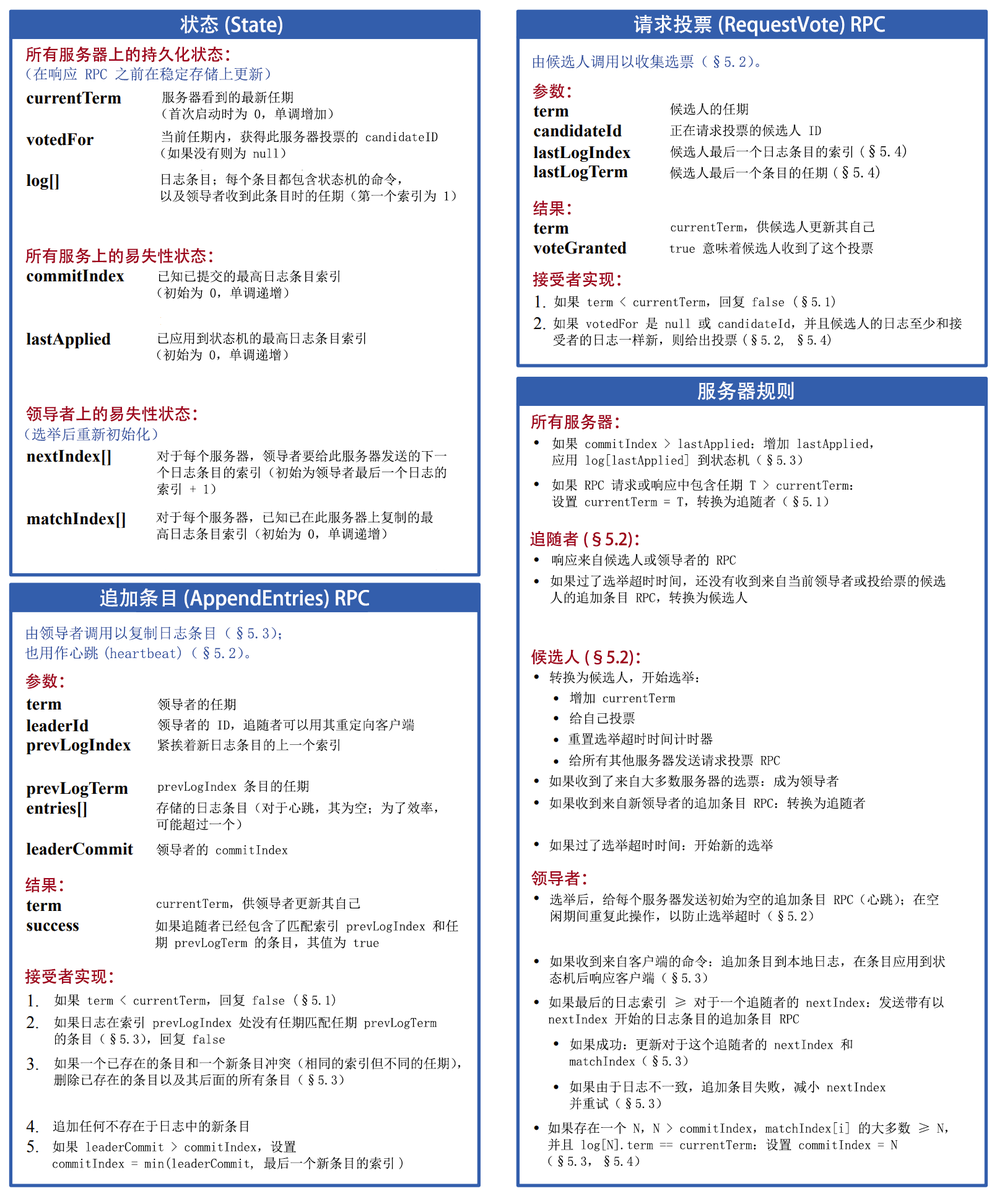
<style>
.page{position:relative;width:997px;height:1196px;background:#ffffff}
.page>*{position:absolute;margin:0}
.t1{font:19.8px "AdobeHeitiStd-Regular";color:#ffffff}
.t2{font:16.5px "AdobeHeitiStd-Regular";color:#9e001a}
.t3{font:14.9px "SimSun";color:#28499b}
.t4{font:13.2px/16.5px "SimSun";color:#000000}
.t5{font:13.2px "SimSun";color:#000000}
.t6{font:14.9px "SimSun";color:#000000}
.t7{font:14.9px/19.8px "SimSun";color:#28499b}
</style>
<div class="page">
<p class="t1" style="left:180px;top:15px;width:102px;height:20px">状态(State)</p>
<p class="t1" style="left:634px;top:15px;width:251px;height:22px">请求投票(RequestVote) RPC</p>
<p class="t2" style="left:26px;top:46px;width:203px;height:17px">所有服务器上的持久化状态：</p>
<p class="t3" style="left:533px;top:55px;width:226px;height:14px">由候选人调用以收集选票（§5.2）。</p>
<p class="t3" style="left:26px;top:67px;width:244px;height:14px">（在响应 RPC 之前在稳定存储上更新）</p>
<p class="t2" style="left:533px;top:83px;width:38px;height:16px">参数：</p>
<p class="t4" style="left:162px;top:91px;width:171px;height:29px">服务器看到的最新任期<br>（首次启动时为 0，单调增加）</p>
<p class="t5" style="left:670px;top:103px;width:79px;height:12px">候选人的任期</p>
<p class="t5" style="left:670px;top:124px;width:151px;height:13px">正在请求投票的候选人 ID</p>
<p class="t4" style="left:161px;top:130px;width:277px;height:29px">当前任期内，获得此服务器投票的 candidateID <br>（如果没有则为 null）</p>
<p class="t5" style="left:670px;top:144px;width:237px;height:14px">候选人最后一个日志条目的索引(<span class="t6">§5.4)</span></p>
<p class="t4" style="left:161px;top:173px;width:295px;height:29px">日志条目；每个条目都包含状态机的命令，<br>以及领导者收到此条目时的任期（第一个索引为 1）</p>
<p class="t5" style="left:670px;top:165px;width:210px;height:14px">候选人最后一个条目的任期(<span class="t6">§5.4)</span></p>
<p class="t2" style="left:533px;top:200px;width:38px;height:16px">结果：</p>
<p class="t5" style="left:671px;top:221px;width:204px;height:12px">currentTerm，供候选人更新其自己</p>
<p class="t5" style="left:670px;top:242px;width:203px;height:13px">true 意味着候选人收到了这个投票</p>
<p class="t2" style="left:25px;top:248px;width:187px;height:16px">所有服务上的易失性状态：</p>
<p class="t4" style="left:157px;top:269px;width:183px;height:30px">已知已提交的最高日志条目索引<br>（初始为 0，单调递增）</p>
<p class="t2" style="left:533px;top:271px;width:88px;height:16px">接受者实现：</p>
<p class="t5" style="left:554px;top:295px;width:281px;height:13px">如果 term &lt; currentTerm，回复 false (§5.1)</p>
<p class="t4" style="left:553px;top:317px;width:409px;height:29px">如果 votedFor 是 null 或 candidateId，并且候选人的日志至少和接<br>受者的日志一样新，则给出投票(§5.2, §5.4)</p>
<p class="t4" style="left:157px;top:331px;width:209px;height:30px">已应用到状态机的最高日志条目索引<br>（初始为 0，单调递增）</p>
<p class="t1" style="left:698px;top:381px;width:96px;height:19px">服务器规则</p>
<p class="t2" style="left:26px;top:406px;width:171px;height:16px">领导者上的易失性状态：</p>
<p class="t2" style="left:531px;top:413px;width:88px;height:17px">所有服务器：</p>
<p class="t3" style="left:25px;top:427px;width:132px;height:14px">（选举后重新初始化）</p>
<p class="t4" style="left:552px;top:437px;width:321px;height:29px">如果 commitIndex &gt; lastApplied：增加 lastApplied，<br>应用 log[lastApplied] 到状态机（§5.3）</p>
<p class="t4" style="left:157px;top:449px;width:290px;height:46px">对于每个服务器，领导者要给此服务器发送的下一<br>个日志条目的索引（初始为领导者最后一个日志的<br>索引 + 1）</p>
<p class="t4" style="left:552px;top:478px;width:301px;height:30px">如果 RPC 请求或响应中包含任期 T &gt; currentTerm：<br>设置 currentTerm = T，转换为追随者（§5.1）</p>
<p class="t4" style="left:156px;top:510px;width:277px;height:30px">对于每个服务器，已知已在此服务器上复制的最<br>高日志条目索引（初始为 0，单调递增）</p>
<p class="t2" style="left:530px;top:530px;width:109px;height:18px">追随者(§5.2)：</p>
<p class="t5" style="left:552px;top:553px;width:184px;height:13px">响应来自候选人或领导者的 RPC</p>
<p class="t4" style="left:550px;top:574px;width:397px;height:30px">如果过了选举超时时间，还没有收到来自当前领导者或投给票的候选<br>人的追加条目 RPC，转换为候选人</p>
<p class="t1" style="left:100px;top:588px;width:270px;height:22px">追加条目(AppendEntries) RPC</p>
<p class="t7" style="left:25px;top:626px;width:256px;height:34px">由领导者调用以复制日志条目（§5.3）；<br>也用作心跳(heartbeat)（§5.2）。</p>
<p class="t2" style="left:531px;top:649px;width:109px;height:16px">候选人(§5.2)：</p>
<p class="t2" style="left:25px;top:673px;width:39px;height:16px">参数：</p>
<p class="t5" style="left:549px;top:671px;width:150px;height:12px">转换为候选人，开始选举：</p>
<p class="t5" style="left:157px;top:698px;width:79px;height:13px">领导者的任期</p>
<p class="t5" style="left:570px;top:691px;width:105px;height:13px">增加 currentTerm</p>
<p class="t5" style="left:570px;top:712px;width:66px;height:12px">给自己投票</p>
<p class="t5" style="left:157px;top:718px;width:257px;height:13px">领导者的 ID，追随者可以用其重定向客户端</p>
<p class="t5" style="left:568px;top:732px;width:145px;height:13px">重置选举超时时间计时器</p>
<p class="t5" style="left:157px;top:738px;width:183px;height:13px">紧挨着新日志条目的上一个索引</p>
<p class="t5" style="left:569px;top:754px;width:212px;height:12px">给所有其他服务器发送请求投票 RPC</p>
<p class="t5" style="left:157px;top:779px;width:152px;height:14px">prevLogIndex 条目的任期</p>
<p class="t5" style="left:549px;top:774px;width:290px;height:13px">如果收到了来自大多数服务器的选票：成为领导者</p>
<p class="t5" style="left:549px;top:796px;width:317px;height:13px">如果收到来自新领导者的追加条目 RPC：转换为追随者</p>
<p class="t4" style="left:156px;top:801px;width:281px;height:30px">存储的日志条目（对于心跳，其为空；为了效率，<br>可能超过一个）</p>
<p class="t5" style="left:156px;top:843px;width:132px;height:12px">领导者的 commitIndex</p>
<p class="t5" style="left:549px;top:839px;width:225px;height:12px">如果过了选举超时时间：开始新的选举</p>
<p class="t2" style="left:532px;top:870px;width:55px;height:16px">领导者：</p>
<p class="t2" style="left:25px;top:877px;width:38px;height:16px">结果：</p>
<p class="t4" style="left:550px;top:893px;width:389px;height:29px">选举后，给每个服务器发送初始为空的追加条目 RPC（心跳）；在空<br>闲期间重复此操作，以防止选举超时（§5.2）</p>
<p class="t5" style="left:157px;top:896px;width:204px;height:13px">currentTerm，供领导者更新其自己</p>
<p class="t4" style="left:155px;top:919px;width:303px;height:30px">如果追随者已经包含了匹配索引 prevLogIndex 和任<br>期 prevLogTerm 的条目，其值为 true</p>
<p class="t4" style="left:549px;top:955px;width:397px;height:29px">如果收到来自客户端的命令：追加条目到本地日志，在条目应用到状<br>态机后响应客户端（§5.3）</p>
<p class="t2" style="left:25px;top:968px;width:88px;height:16px">接受者实现：</p>
<p class="t5" style="left:54px;top:994px;width:281px;height:12px">如果 term &lt; currentTerm，回复 false (§5.1)</p>
<p class="t4" style="left:549px;top:995px;width:395px;height:30px">如果最后的日志索引 ≥ 对于一个追随者的 nextIndex：发送带有以<br>nextIndex 开始的日志条目的追加条目 RPC</p>
<p class="t4" style="left:54px;top:1015px;width:383px;height:30px">如果日志在索引 prevLogIndex 处没有任期匹配任期 prevLogTerm <br>的条目（§5.3），回复 false</p>
<p class="t4" style="left:569px;top:1038px;width:284px;height:28px">如果成功：更新对于这个追随者的 nextIndex 和<br>matchIndex（§5.3）</p>
<p class="t4" style="left:54px;top:1056px;width:407px;height:30px">如果一个已存在的条目和一个新条目冲突（相同的索引但不同的任期），<br>删除已存在的条目以及其后面的所有条目（§5.3）</p>
<p class="t4" style="left:570px;top:1080px;width:316px;height:29px">如果由于日志不一致，追加条目失败，减小 nextIndex <br>并重试（§5.3）</p>
<p class="t5" style="left:53px;top:1119px;width:195px;height:13px">追加任何不存在于日志中的新条目</p>
<p class="t4" style="left:548px;top:1121px;width:400px;height:45px">如果存在一个 N，N &gt; commitIndex，matchIndex[i] 的大多数 ≥ N，<br>并且 log[N].term == currentTerm：设置 commitIndex = N<br>（§5.3，§5.4）</p>
<p class="t4" style="left:53px;top:1140px;width:350px;height:30px">如果 leaderCommit &gt; commitIndex，设置 <br>commitIndex = min(leaderCommit, 最后一个新条目的索引)</p>
</div>
